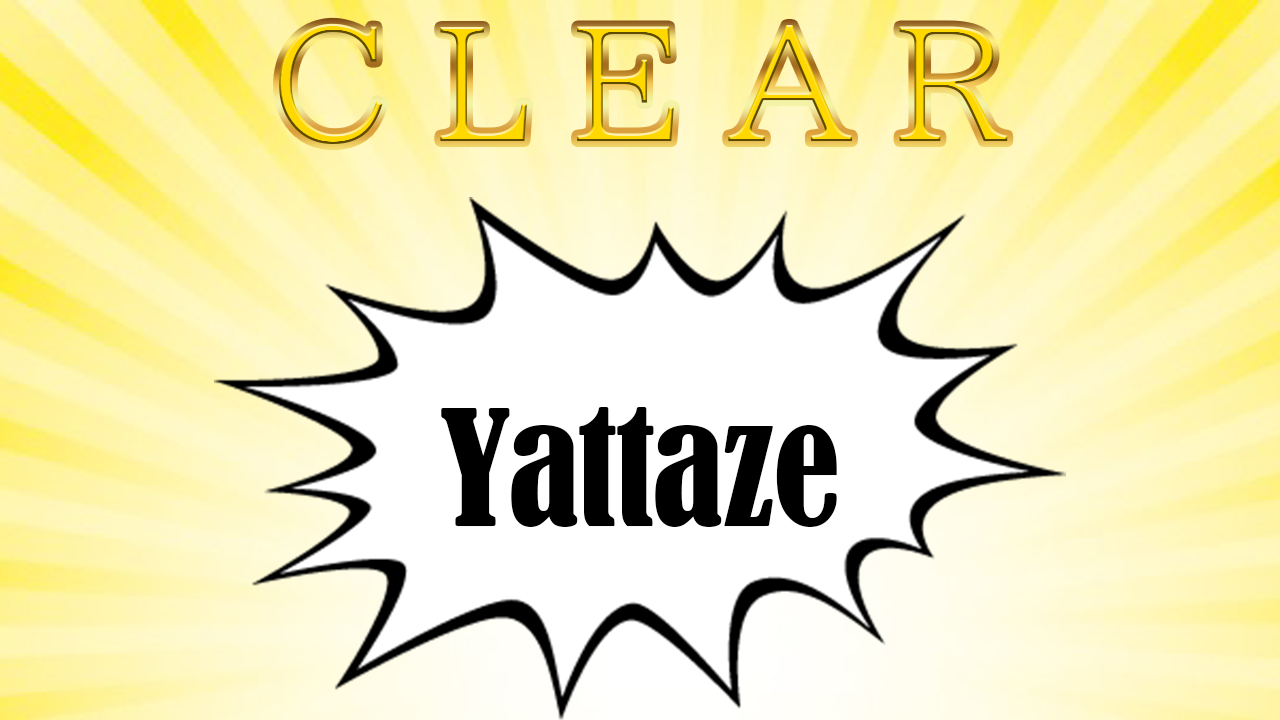
<style>
.page{position:relative;width:1280px;height:720px}
.page>*{position:absolute;margin:0}
.t1{font:150px "BIZ-UDPMincho-Medium";letter-spacing:-0.02em}
.t2{font:150px "BernardMT-Condensed";letter-spacing:-0.02em;color:#000000}
</style>
<div class="page">
<p class="t1" style="left:279px;top:23px;width:729px;height:121px">C L E A R</p>
<p class="t2" style="left:441px;top:407px;width:396px;height:120px">Yattaze</p>
</div>
